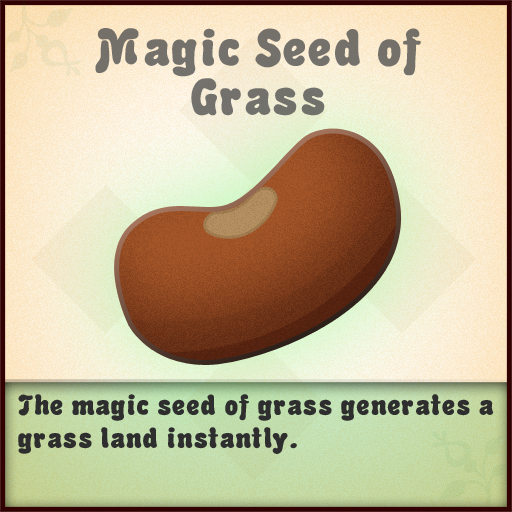
<style>
.page{position:relative;width:512px;height:512px}
.page>*{position:absolute;margin:0}
.t1{font:50px/48.6px "Advert-Regular";color:#74716b}
.t2{font:27.8px "Advert-Regular";color:#2e2e2e}
</style>
<div class="page">
<p class="t1" style="left:95px;top:28px;width:326px;height:88px;text-align:center">Magic Seed of Grass</p>
<p class="t2" style="left:18px;top:394px;width:476px;height:60px">The magic seed of grass generates a grass land instantly.</p>
</div>
